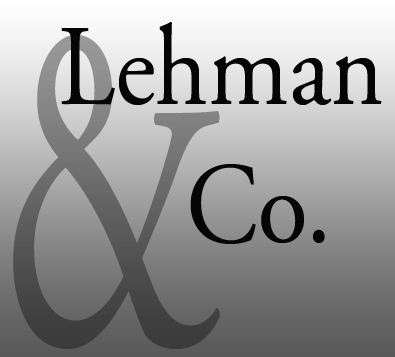
<style>
.page{position:relative;width:395px;height:357px}
.page>*{position:absolute;margin:0}
.t1{font:114.9px "AGaramondPro-Regular";color:#060505;scale:0.89 1}
.t2{font:479.3px "AGaramondPro-Regular";scale:0.58 1}
</style>
<div class="page">
<p class="t1" style="left:61px;top:22px;width:321px;height:222px">Lehman<br>     Co.</p>
<p class="t2" style="left:13px;top:34px;width:207px;height:315px">&amp;</p>
</div>
